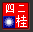
<style>
.page{position:relative;width:33px;height:32px;background:#f20000}
.page>*{position:absolute;margin:0}
.t1{font:10.4px "SimSun";color:#ffffff}
.t2{font:11.7px "SimSun";color:#ffffff}
</style>
<div class="page">
<p class="t1" style="left:6px;top:4px;width:19px;height:9px">四二</p>
<p class="t2" style="left:16px;top:15px;width:11px;height:12px">桂</p>
</div>
